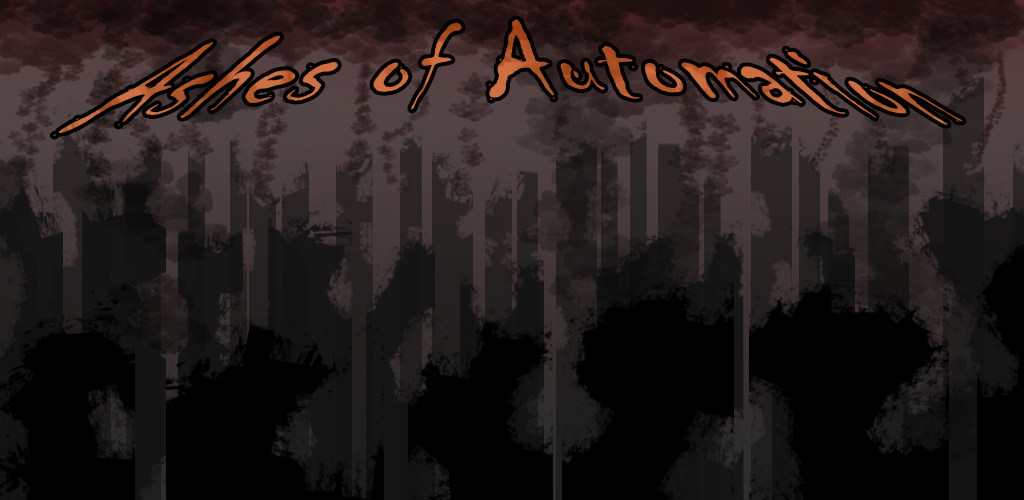
<style>
.page{position:relative;width:1024px;height:500px;background:#000000}
.page>*{position:absolute;margin:0}
.t1{font:123.4px "Chiller-Regular";color:#bc5e31;font-weight:bold}
</style>
<div class="page">
<p class="t1" style="left:53px;top:19px;width:910px;height:117px">Ashes of Automation</p>
</div>
